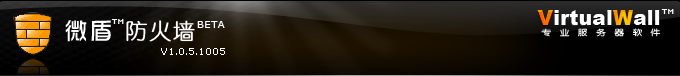
<style>
.page{position:relative;width:680px;height:76px}
.page>*{position:absolute;margin:0}
.t1{font:19.7px "Arial-Black";letter-spacing:0.025em;color:#ffffff}
.t2{font:19.7px "Arial-Black";letter-spacing:0.025em;color:#ff9900}
.t3{font:6px "04b08";letter-spacing:0.025em;color:#ffffff}
.t4{font:24px "DFHuaZong-W5-WINP-BF";letter-spacing:0.05em;color:#ffffff}
.t5{font:6px "04b08";letter-spacing:0.05em;color:#ffffff}
.t6{font:22px "YouYuan";letter-spacing:0.05em;color:#ffffff;font-weight:bold}
.t7{font:10px "Verdana";letter-spacing:0.05em;color:#ffffff}
.t8{font:7.9px "YouYuan";letter-spacing:0.85em;color:#ffffff;scale:1.25 1}
.t9{font:9px "Verdana";color:#ffffff}
</style>
<div class="page">
<p class="t1" style="left:537px;top:10px;width:123px;height:15px"><span class="t2">V</span>irtual<span class="t2">W</span>all</p>
<p class="t3" style="left:661px;top:9px;width:13px;height:5px">TM</p>
<p class="t4" style="left:65px;top:20px;width:46px;height:22px">微盾</p>
<p class="t5" style="left:111px;top:19px;width:13px;height:5px">TM</p>
<p class="t6" style="left:126px;top:20px;width:69px;height:22px">防火墙</p>
<p class="t7" style="left:197px;top:21px;width:28px;height:7px">BETA</p>
<p class="t8" style="left:541px;top:28px;width:120px;height:9px">专业服务器软件</p>
<p class="t9" style="left:161px;top:48px;width:64px;height:7px">V1.0.5.1005</p>
</div>
